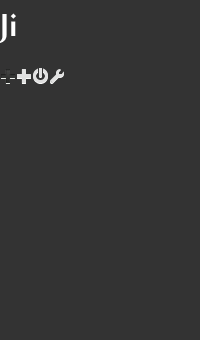
<style>
.page{position:relative;width:200px;height:340px;background:#333333}
.page>*{position:absolute;margin:0}
.t1{font:48px "MoolBoran";color:#ffffff}
</style>
<div class="page">
<p class="t1" style="left:0px;top:13px;width:16px;height:30px">Ji</p>
</div>
